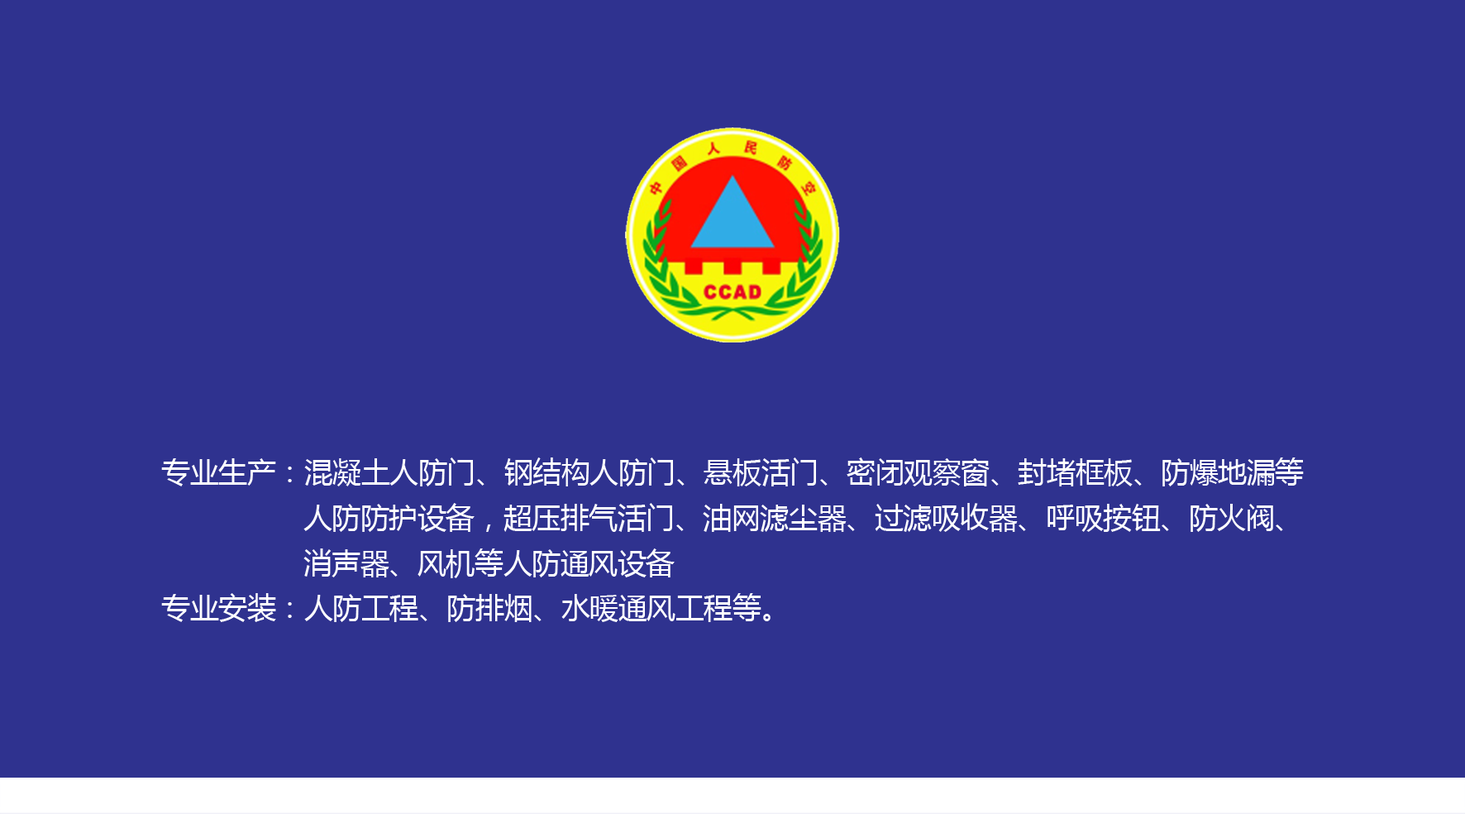
<style>
.page{position:relative;width:1465px;height:814px;background:#2f328f}
.page>*{position:absolute;margin:0}
.t1{font:28.7px/45.4px "MicrosoftYaHei";letter-spacing:-0.005em;color:#ffffff}
</style>
<div class="page">
<p class="t1" style="left:161px;top:457px;width:1143px;height:165px">专业生产：混凝土人防门、钢结构人防门、悬板活门、密闭观察窗、封堵框板、防爆地漏等<br>                 人防防护设备，超压排气活门、油网滤尘器、过滤吸收器、呼吸按钮、防火阀、<br>                 消声器、风机等人防通风设备<br>专业安装：人防工程、防排烟、水暖通风工程等。</p>
</div>
